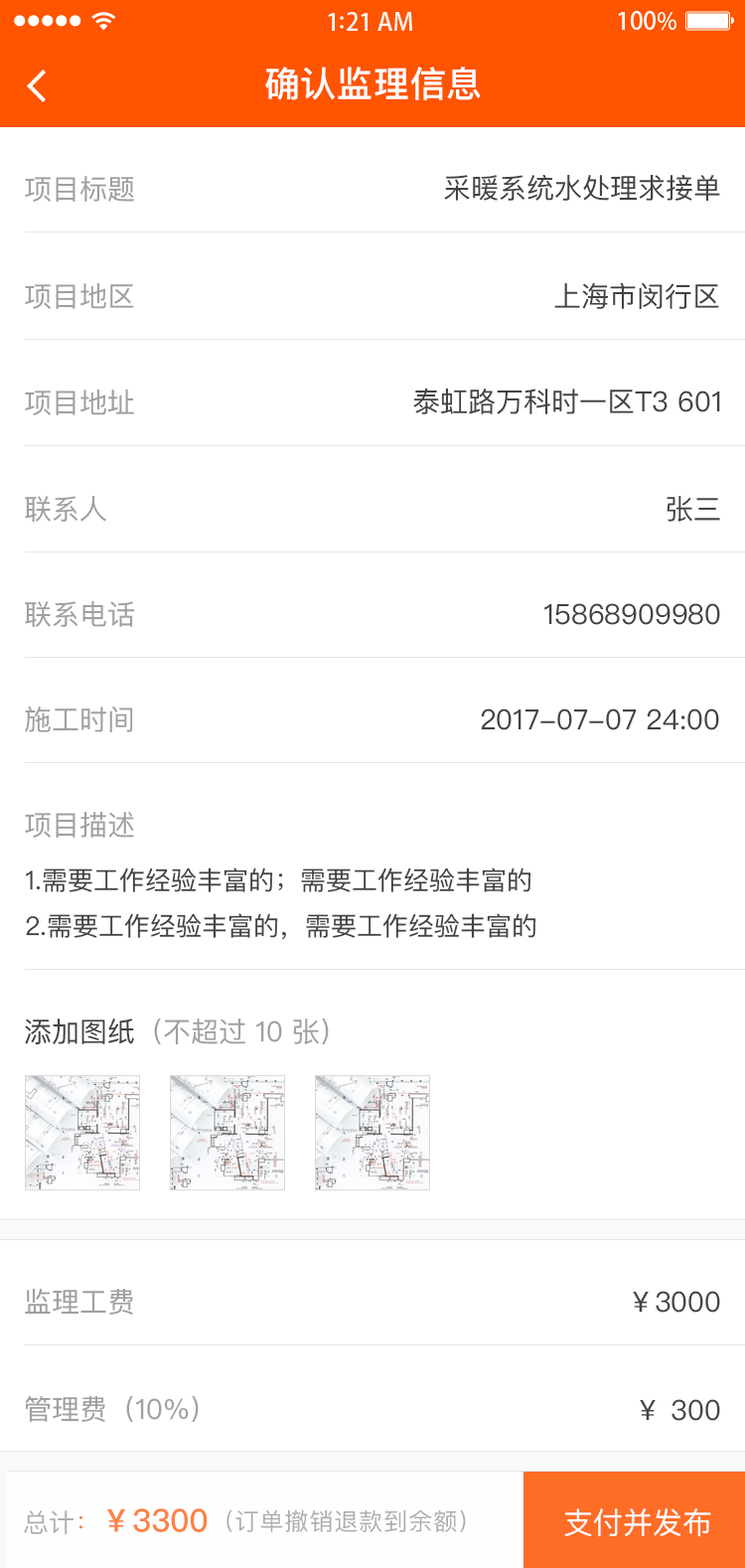
<style>
.page{position:relative;width:745px;height:1568px;background:#ffffff}
.page>*{position:absolute;margin:0}
.t1{font:35.8px "PingFangSC-Medium";letter-spacing:0.02em;color:#ffffff}
.t2{font:27.8px "PingFangSC-Regular";color:#434343}
.t3{font:27.8px "PingFangSC-Regular";color:#a0a0a0}
.t4{font:25.8px/49.7px "PingFangSC-Regular";color:#434343}
.t5{font:31.8px "PingFangSC-Medium";color:#fd8245;text-transform:uppercase}
.t6{font:25.8px "PingFangSC-Regular";color:#fd8245;text-transform:uppercase}
.t7{font:23.8px "PingFangSC-Regular";letter-spacing:0.04em;color:#a0a0a0;text-transform:uppercase}
.t8{font:29.8px "PingFangSC-Regular";color:#ffffff}
</style>
<div class="page">
<p class="t1" style="left:265px;top:67px;width:216px;height:33px">确认监理信息</p>
<p class="t2" style="left:444px;top:174px;width:276px;height:27px">采暖系统水处理求接单</p>
<p class="t3" style="left:25px;top:176px;width:109px;height:26px">项目标题</p>
<p class="t3" style="left:25px;top:283px;width:109px;height:26px">项目地区</p>
<p class="t2" style="left:554px;top:282px;width:165px;height:27px">上海市闵行区</p>
<p class="t3" style="left:25px;top:390px;width:109px;height:25px">项目地址</p>
<p class="t2" style="left:413px;top:388px;width:307px;height:26px">泰虹路万科时一区T3 601</p>
<p class="t3" style="left:25px;top:496px;width:81px;height:27px">联系人</p>
<p class="t2" style="left:667px;top:496px;width:53px;height:26px">张三</p>
<p class="t3" style="left:25px;top:601px;width:110px;height:27px">联系电话</p>
<p class="t2" style="left:545px;top:603px;width:175px;height:22px">15868909980</p>
<p class="t3" style="left:25px;top:706px;width:108px;height:26px">施工时间</p>
<p class="t2" style="left:481px;top:708px;width:238px;height:22px">2017-07-07 24:00</p>
<p class="t3" style="left:25px;top:812px;width:109px;height:26px">项目描述</p>
<p class="t4" style="left:26px;top:867px;width:511px;height:73px">1.需要工作经验丰富的；需要工作经验丰富的<br>2.需要工作经验丰富的，需要工作经验丰富的</p>
<p class="t3" style="left:25px;top:1018px;width:304px;height:27px"><span class="t2">添加图纸</span>（不超过 10 张）</p>
<p class="t3" style="left:25px;top:1288px;width:108px;height:27px">监理工费</p>
<p class="t2" style="left:633px;top:1291px;width:87px;height:22px">￥3000</p>
<p class="t3" style="left:25px;top:1395px;width:174px;height:28px">管理费（10%）</p>
<p class="t2" style="left:640px;top:1399px;width:80px;height:22px">￥ 300</p>
<p class="t5" style="left:24px;top:1508px;width:184px;height:27px"><span class="t6">总计</span><span class="t6">：</span>￥3300</p>
<p class="t7" style="left:227px;top:1509px;width:239px;height:23px">（订单撤销退款到余额）</p>
<p class="t8" style="left:564px;top:1508px;width:147px;height:29px">支付并发布</p>
</div>
